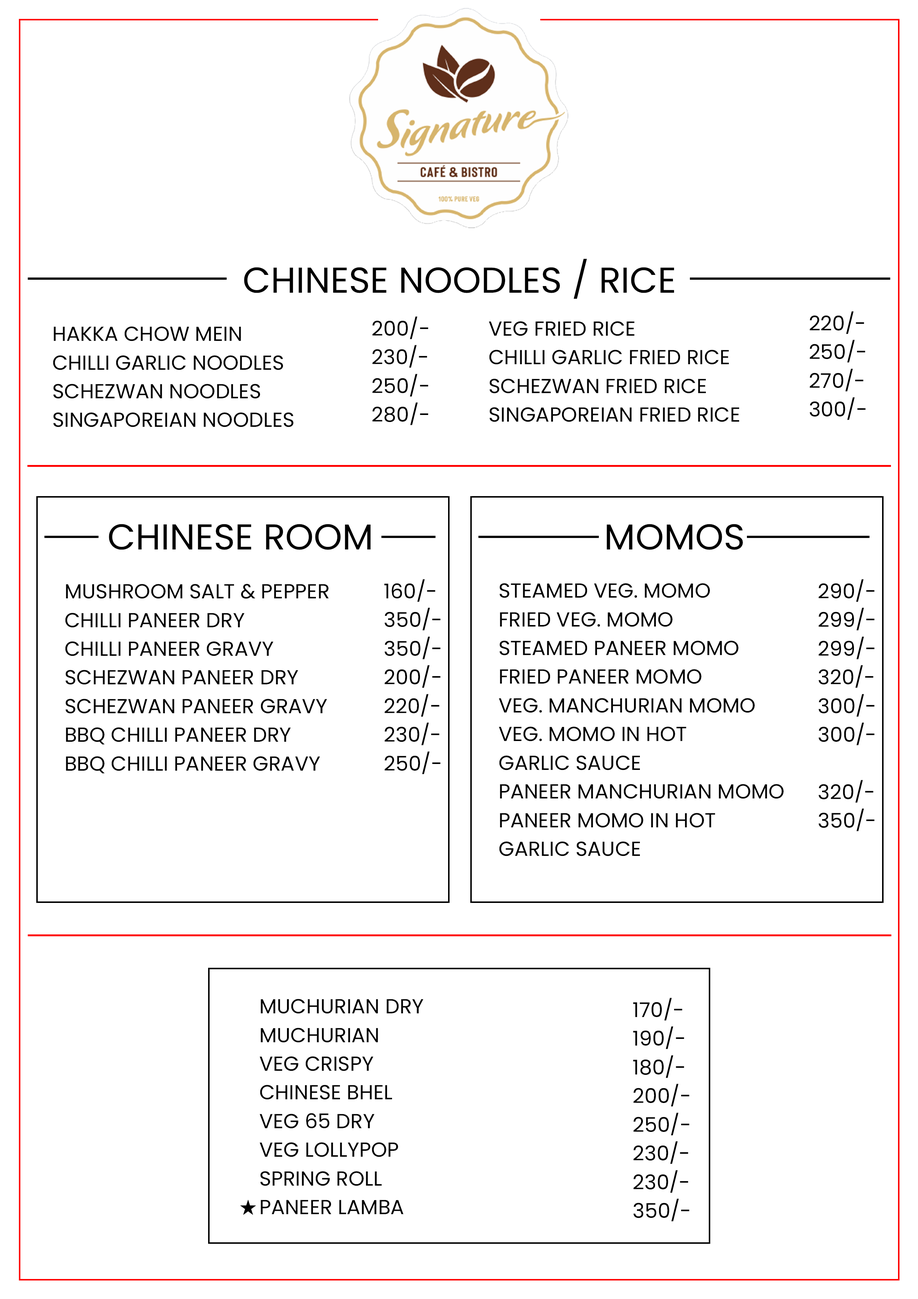
<style>
.page{position:relative;width:918px;height:1299px;background:#ffffff}
.page>*{position:absolute;margin:0}
.t1{font:35.9px "Poppins-Regular";color:#000000;text-transform:uppercase}
.t2{font:20.4px/28.7px "Poppins-Regular";color:#000000}
.t3{font:20.4px/28.7px "Poppins-Regular";color:#000000;text-transform:uppercase}
</style>
<div class="page">
<p class="t1" style="left:244px;top:259px;width:431px;height:40px">CHINESE NOODLES / RICE</p>
<p class="t2" style="left:372px;top:316px;width:57px;height:109px">200/-<br>230/-<br>250/-<br>280/-</p>
<p class="t2" style="left:810px;top:311px;width:56px;height:109px">220/-<br>250/-<br>270/-<br>300/-</p>
<p class="t2" style="left:53px;top:326px;width:241px;height:101px">HAKKA CHOW MEIN<br>CHILLI GARLIC NOODLES<br>SCHEZWAN NOODLES<br>SINGAPOREIAN NOODLES</p>
<p class="t2" style="left:489px;top:321px;width:250px;height:101px">VEG FRIED RICE<br>CHILLI GARLIC FRIED RICE<br>SCHEZWAN FRIED RICE<br>SINGAPOREIAN FRIED RICE</p>
<p class="t1" style="left:109px;top:524px;width:262px;height:26px">CHINESE ROOM</p>
<p class="t1" style="left:607px;top:524px;width:136px;height:26px">MOMOS</p>
<p class="t2" style="left:384px;top:579px;width:57px;height:195px">160/-<br>350/-<br>350/-<br>200/-<br>220/-<br>230/-<br>250/-</p>
<p class="t2" style="left:819px;top:579px;width:56px;height:252px">290/-<br>299/-<br>299/-<br>320/-<br>300/-<br>300/-<br><br>320/-<br>350/-</p>
<p class="t2" style="left:65px;top:584px;width:264px;height:189px">MUSHROOM SALT &amp; PEPPER<br>CHILLI PANEER DRY<br>CHILLI PANEER GRAVY<br>SCHEZWAN PANEER DRY<br>SCHEZWAN PANEER GRAVY<br>BBQ CHILLI PANEER DRY<br>BBQ CHILLI PANEER GRAVY</p>
<p class="t2" style="left:499px;top:583px;width:285px;height:273px">STEAMED VEG. MOMO<br>FRIED VEG. MOMO<br>STEAMED PANEER MOMO<br>FRIED PANEER MOMO<br>VEG. MANCHURIAN MOMO<br>VEG. MOMO IN HOT <br>GARLIC SAUCE<br>PANEER MANCHURIAN MOMO<br>PANEER MOMO IN HOT<br>GARLIC SAUCE</p>
<p class="t3" style="left:260px;top:999px;width:163px;height:215px">Muchurian dry<br>Muchurian<br>Veg crispy <br>Chinese bhel <br>Veg 65 dry<br>Veg lollypop <br>Spring roll<br>paneer lamba</p>
<p class="t2" style="left:633px;top:997px;width:57px;height:224px">170/-<br>190/-<br>180/-<br>200/-<br>250/-<br>230/-<br>230/-<br>350/-</p>
</div>
